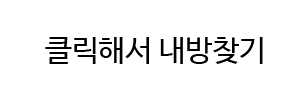
<style>
.page{position:relative;width:300px;height:100px;background:#ffffff}
.page>*{position:absolute;margin:0}
.t1{font:30px "NanumBarunGothic";color:#000000}
</style>
<div class="page">
<p class="t1" style="left:45px;top:37px;width:218px;height:27px">클릭해서 내방찾기</p>
</div>
